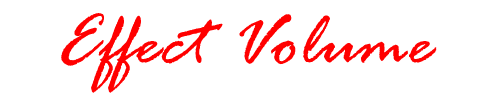
<style>
.page{position:relative;width:500px;height:100px;background:#ffffff}
.page>*{position:absolute;margin:0}
.t1{font:78px "RageItalic";color:#ff0000}
</style>
<div class="page">
<p class="t1" style="left:61px;top:13px;width:376px;height:80px">Effect Volume</p>
</div>
